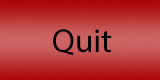
<style>
.page{position:relative;width:160px;height:80px}
.page>*{position:absolute;margin:0}
.t1{font:33.3px "MyriadPro-Regular";color:#000000}
</style>
<div class="page">
<p class="t1" style="left:53px;top:29px;width:59px;height:27px">Quit</p>
</div>
